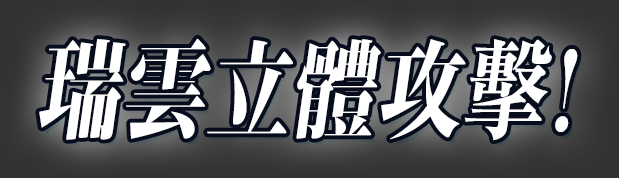
<style>
.page{position:relative;width:619px;height:178px}
.page>*{position:absolute;margin:0}
.t1{font:107.1px "KochoStd-Heavy";color:#ffffff;font-style:italic;scale:0.79 1}
.t2{font:107.1px "RyuminPro-ExBold";color:#ffffff;font-style:italic;scale:0.79 1}
</style>
<div class="page">
<p class="t1" style="left:39px;top:38px;width:539px;height:103px">瑞雲立體攻<span class="t2">擊</span>!</p>
</div>
